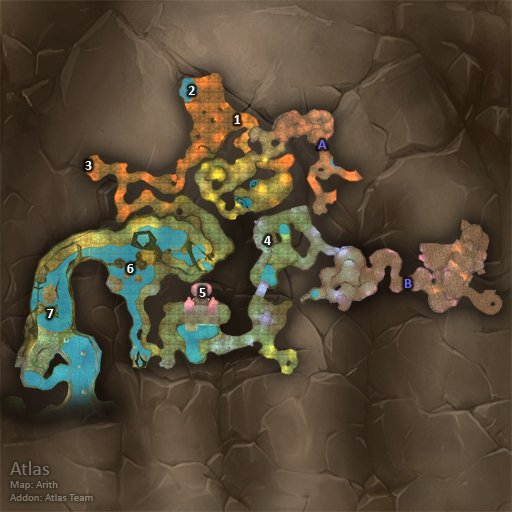
<style>
.page{position:relative;width:512px;height:512px}
.page>*{position:absolute;margin:0}
.t1{font:14px "Calibri-Bold";color:#ffffff}
.t2{font:14px "Calibri-Bold";color:#6666ff}
</style>
<div class="page">
<p class="t1" style="left:188px;top:86px;width:7px;height:9px">2</p>
<p class="t1" style="left:234px;top:115px;width:7px;height:9px">1</p>
<p class="t2" style="left:318px;top:140px;width:9px;height:9px">A</p>
<p class="t1" style="left:85px;top:161px;width:7px;height:9px">3</p>
<p class="t1" style="left:264px;top:236px;width:7px;height:9px">4</p>
<p class="t1" style="left:127px;top:264px;width:7px;height:9px">6</p>
<p class="t2" style="left:404px;top:279px;width:8px;height:9px">B</p>
<p class="t1" style="left:199px;top:288px;width:7px;height:9px">5</p>
<p class="t1" style="left:47px;top:309px;width:7px;height:9px">7</p>
</div>
